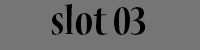
<style>
.page{position:relative;width:200px;height:50px;background:#757575}
.page>*{position:absolute;margin:0}
.t1{font:44px "NuevaStd-BoldCond";color:#000000}
</style>
<div class="page">
<p class="t1" style="left:51px;top:4px;width:95px;height:31px">slot 03</p>
</div>
